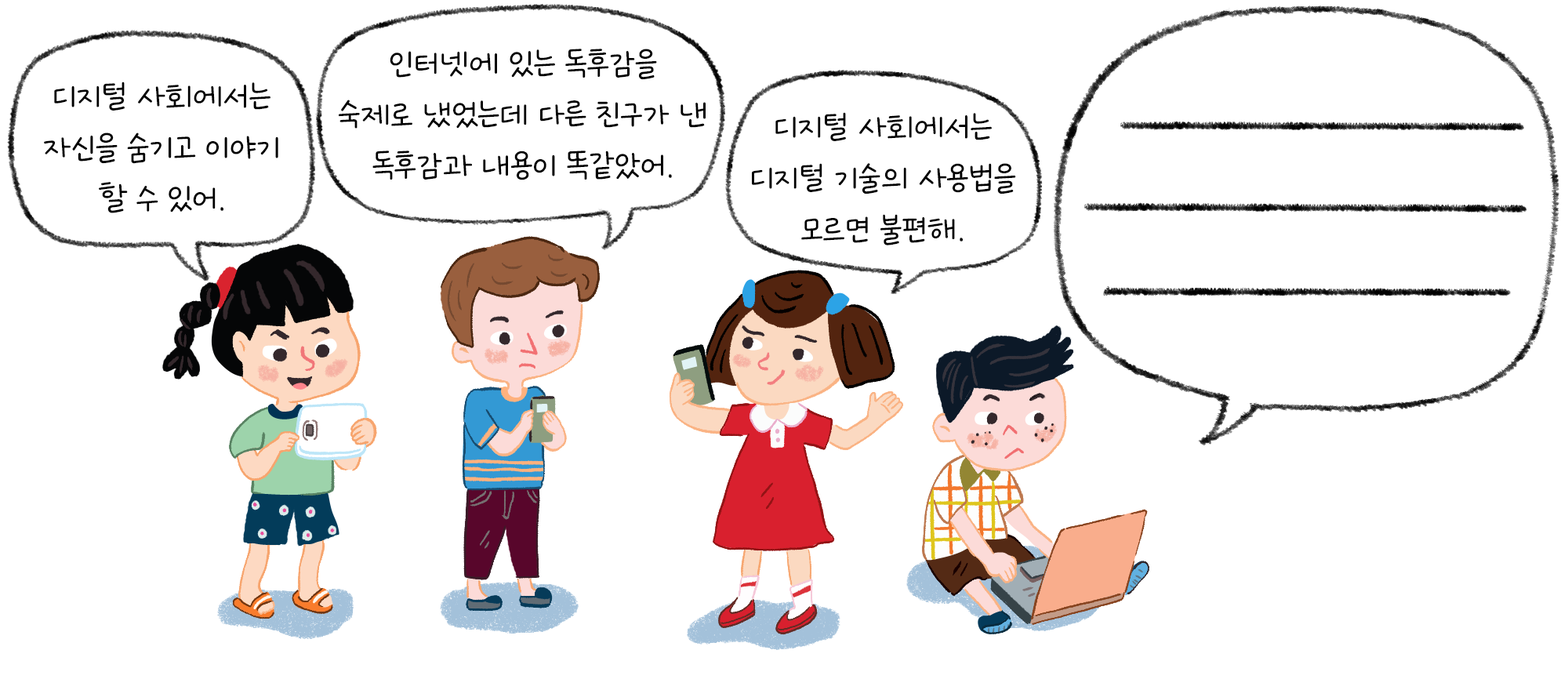
<style>
.page{position:relative;width:1568px;height:690px;background:#ffffff}
.page>*{position:absolute;margin:0}
.t1{font:42.5px "GangwonEduSaeeumMedium";color:#000000}
</style>
<div class="page">
<p class="t1" style="left:339px;top:49px;width:367px;height:131px;text-align:center">인터넷에 있는 독후감을<br>숙제로 냈었는데 다른 친구가 낸<br>독후감과 내용이 똑같았어.</p>
<p class="t1" style="left:44px;top:82px;width:234px;height:131px;text-align:center">디지털 사회에서는<br>자신을 숨기고 이야기<br>할 수 있어.</p>
<p class="t1" style="left:752px;top:112px;width:264px;height:133px;text-align:center">디지털 사회에서는<br>디지털 기술의 사용법을<br>모르면 불편해.</p>
</div>
